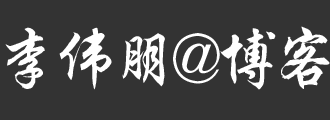
<style>
.page{position:relative;width:330px;height:120px;background:#333333}
.page>*{position:absolute;margin:0}
.t1{font:67px "FZXKJW--GB1-0";letter-spacing:-0.14em;color:#ffffff}
</style>
<div class="page">
<p class="t1" style="left:5px;top:26px;width:325px;height:64px">李伟朋@博客</p>
</div>
